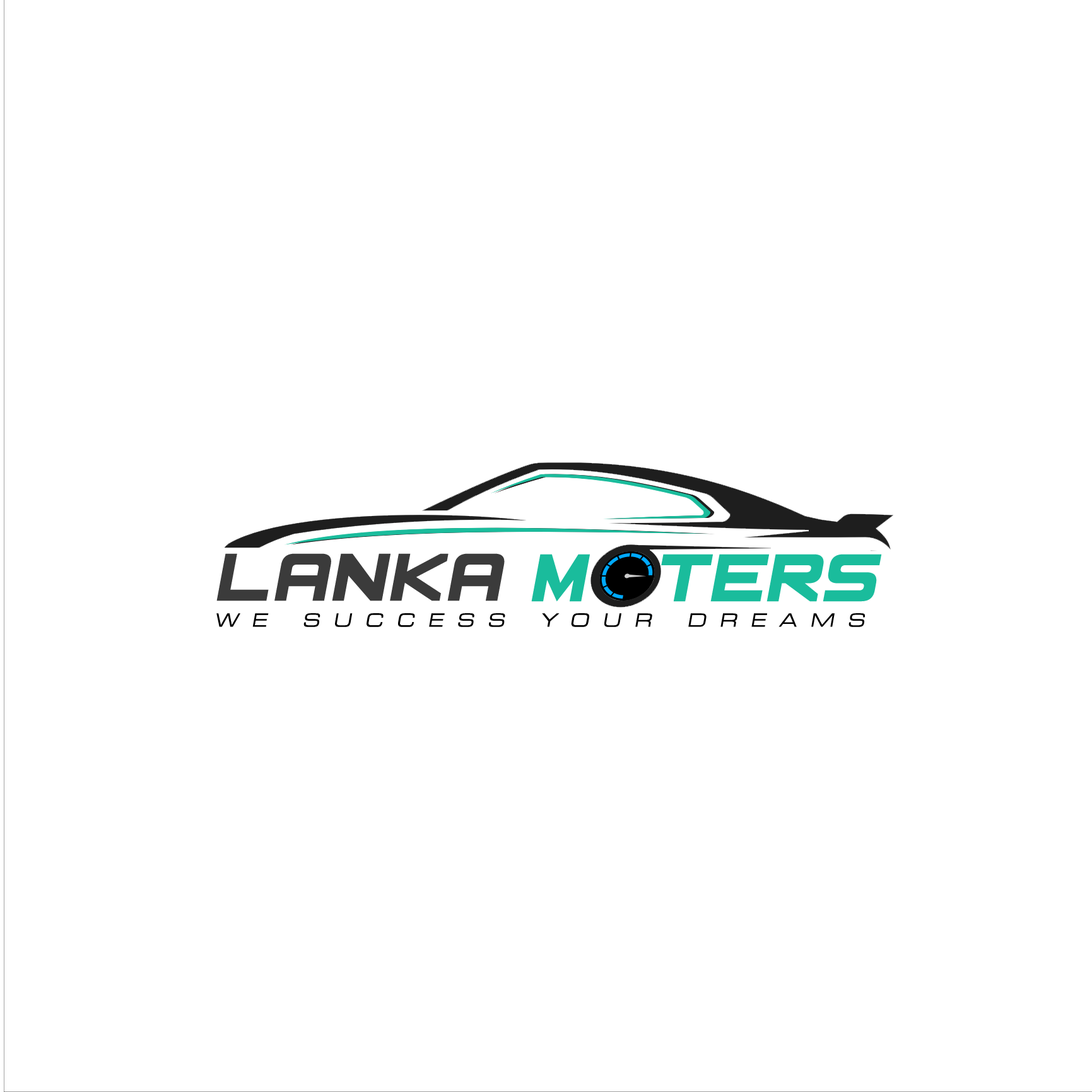
<style>
.page{position:relative;width:1092px;height:1092px;background:#ffffff}
.page>*{position:absolute;margin:0}
.t1{font:73.8px "BasicSquare7Solid";letter-spacing:-0.04em;color:#3b3b3b;font-style:italic;scale:1.06 1}
.t2{font:73.8px "BasicSquare7Solid";letter-spacing:-0.06em;color:#1abc9c;font-style:italic;scale:1.06 1}
.t3{font:18.1px "Square721BT-RomanExtended";letter-spacing:0.74em;color:#000000;font-style:italic}
</style>
<div class="page">
<p class="t1" style="left:216px;top:553px;width:289px;height:48px">lanka</p>
<p class="t2" style="left:531px;top:554px;width:351px;height:48px">m  ters</p>
<p class="t3" style="left:216px;top:613px;width:649px;height:14px">WE SUCCESS YOUR DREAMS</p>
</div>
